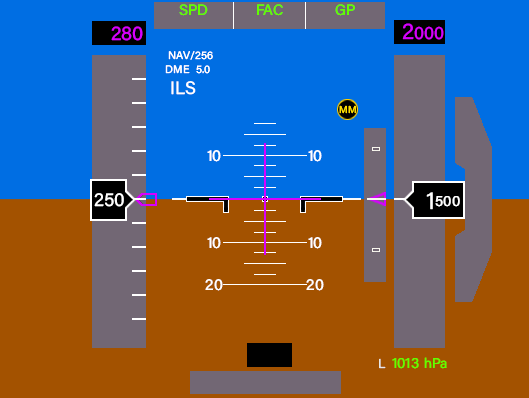
<style>
.page{position:relative;width:529px;height:398px;background:#a35200}
.page>*{position:absolute;margin:0}
.t1{font:15px "AcuminConcept-Regular";color:#60ff00}
.t2{font:20px "AcuminConcept-Regular";color:#d700fe}
.t3{font:23px "AcuminConcept-Regular";color:#d700fe}
.t4{font:18px "AcuminConcept-Regular";color:#d700fe}
.t5{font:11px "AcuminConcept-Regular";color:#ffffff}
.t6{font:18px "AcuminConcept-Regular";color:#ffffff}
.t7{font:16px "AcuminConcept-Regular";color:#ffffff}
.t8{font:19px "AcuminConcept-Regular";color:#ffffff}
.t9{font:25px "AcuminConcept-Regular";color:#ffffff}
.t10{font:15px "AcuminConcept-Regular";color:#ffffff}
.t11{font:13px "AcuminConcept-Regular";color:#e7e7e7}
.t12{font:14px "AcuminConcept-Regular";color:#60ff00}
</style>
<div class="page">
<p class="t1" style="left:179px;top:4px;width:29px;height:12px">SPD</p>
<p class="t1" style="left:257px;top:4px;width:26px;height:12px">FAC</p>
<p class="t1" style="left:335px;top:4px;width:20px;height:12px">GP</p>
<p class="t2" style="left:111px;top:26px;width:32px;height:15px">280</p>
<p class="t3" style="left:402px;top:23px;width:12px;height:17px">2</p>
<p class="t4" style="left:414px;top:26px;width:30px;height:14px">000</p>
<p class="t5" style="left:168px;top:51px;width:45px;height:9px">NAV/256</p>
<p class="t5" style="left:165px;top:65px;width:25px;height:9px">DME</p>
<p class="t5" style="left:196px;top:65px;width:14px;height:9px">5.0</p>
<p class="t6" style="left:171px;top:81px;width:25px;height:14px">ILS</p>
<p class="t7" style="left:207px;top:150px;width:14px;height:12px">10</p>
<p class="t7" style="left:308px;top:150px;width:14px;height:12px">10</p>
<p class="t8" style="left:94px;top:193px;width:30px;height:14px">250</p>
<p class="t9" style="left:426px;top:192px;width:7px;height:18px">1</p>
<p class="t10" style="left:435px;top:196px;width:25px;height:11px">500</p>
<p class="t7" style="left:207px;top:237px;width:14px;height:12px">10</p>
<p class="t7" style="left:308px;top:237px;width:14px;height:12px">10</p>
<p class="t7" style="left:205px;top:279px;width:18px;height:12px">20</p>
<p class="t7" style="left:306px;top:279px;width:18px;height:12px">20</p>
<p class="t11" style="left:379px;top:358px;width:7px;height:11px">L</p>
<p class="t1" style="left:392px;top:358px;width:27px;height:11px">1013</p>
<p class="t12" style="left:424px;top:357px;width:23px;height:12px">hPa</p>
</div>
